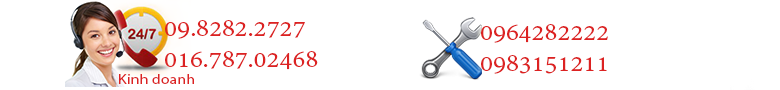
<style>
.page{position:relative;width:780px;height:90px;background:#ffffff}
.page>*{position:absolute;margin:0}
.t1{font:26px "AdobeDevanagari-Regular";color:#dc2222;scale:1.1 1}
.t2{font:13.6px "MyriadPro-Regular";color:#dc2222;scale:1.18 1}
</style>
<div class="page">
<p class="t1" style="left:165px;top:20px;width:153px;height:50px">09.8282.2727<br>016.787.02468</p>
<p class="t1" style="left:481px;top:24px;width:127px;height:50px">0964282222<br>0983151211</p>
<p class="t2" style="left:119px;top:74px;width:75px;height:10px">Kinh doanh</p>
</div>
